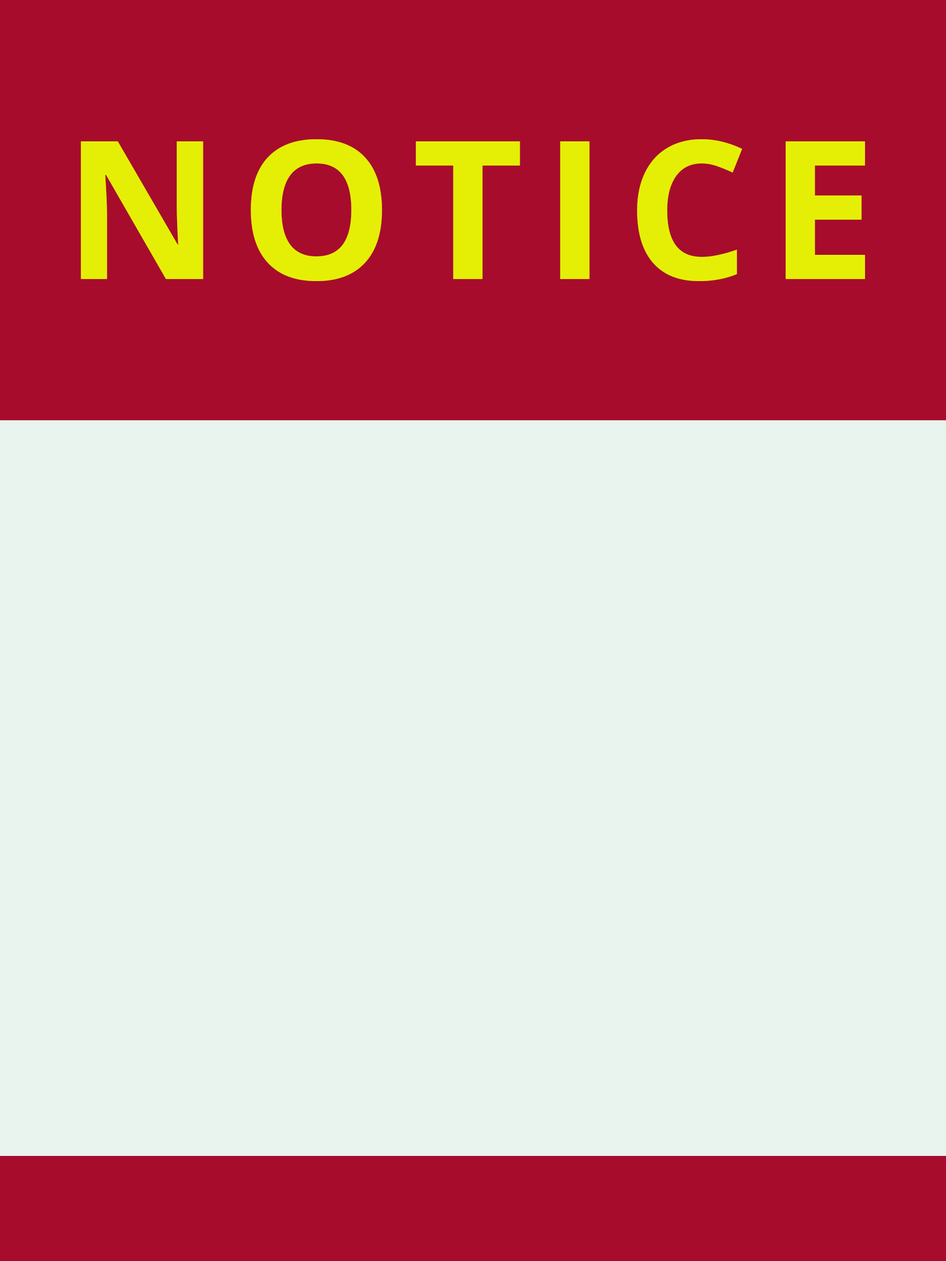
<style>
.page{position:relative;width:946px;height:1261px;background:#e9f4ee}
.page>*{position:absolute;margin:0}
.t1{font:192.6px "OpenSans-Bold";letter-spacing:0.1em;color:#e5ef06}
</style>
<div class="page">
<p class="t1" style="left:80px;top:139px;width:785px;height:142px">NOTICE</p>
</div>
